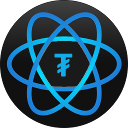
<style>
.page{position:relative;width:128px;height:128px;background:#ffffff}
.page>*{position:absolute;margin:0}
.t1{font:36px "Calibri-Bold";letter-spacing:0.03em;color:#11aceb}
</style>
<div class="page">
<p class="t1" style="left:54px;top:53px;width:19px;height:24px">₮</p>
</div>
